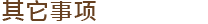
<style>
.page{position:relative;width:208px;height:24px;background:#ffffff}
.page>*{position:absolute;margin:0}
.t1{font:24px "MicrosoftJhengHeiBold";color:#684121}
</style>
<div class="page">
<p class="t1" style="left:2px;top:0px;width:94px;height:21px">其它事项</p>
</div>
